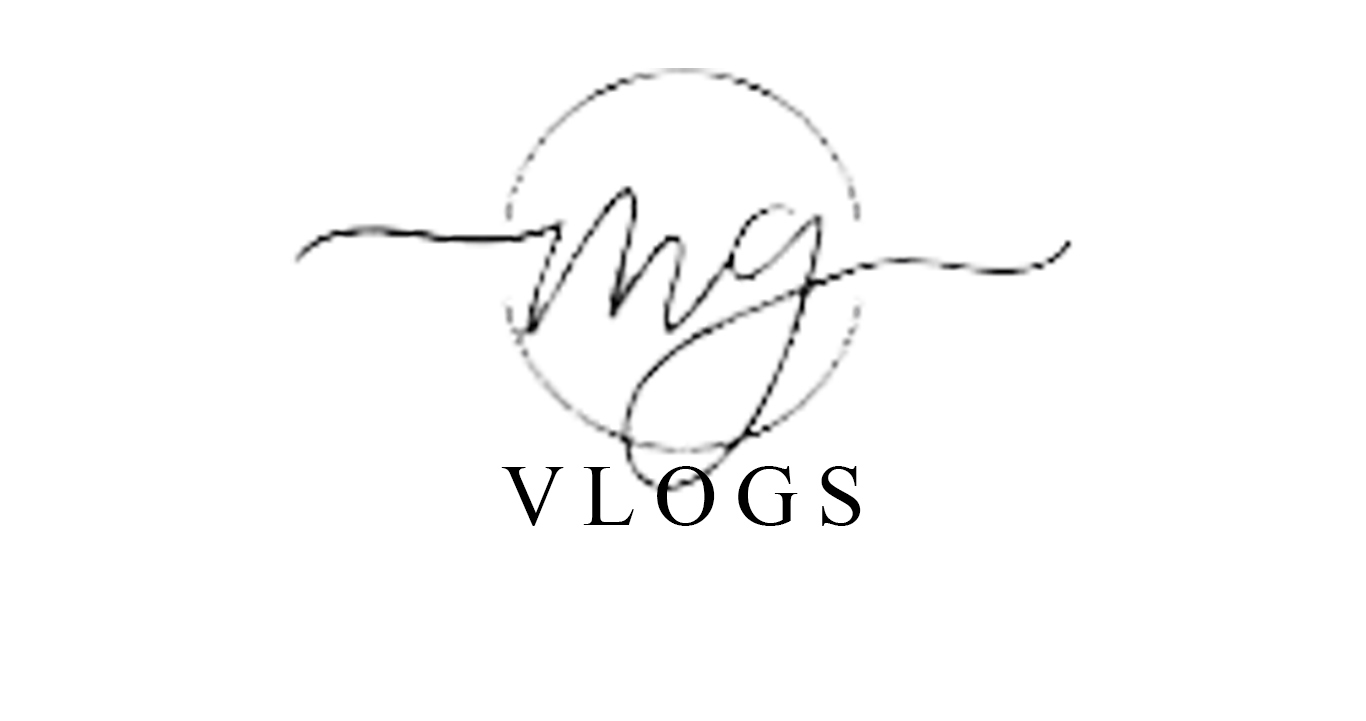
<style>
.page{position:relative;width:1366px;height:721px;background:#ffffff}
.page>*{position:absolute;margin:0}
.t1{font:88px "TimesNewRomanPSMT";letter-spacing:0.2em;color:#000000}
</style>
<div class="page">
<p class="t1" style="left:501px;top:466px;width:360px;height:60px">VLOGS</p>
</div>
